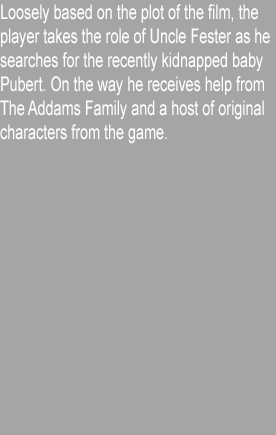
<style>
.page{position:relative;width:276px;height:435px;background:#a5a5a5}
.page>*{position:absolute;margin:0}
.t1{font:20px "ArialMT";color:#ffffff;scale:0.72 1}
</style>
<div class="page">
<p class="t1" style="left:0px;top:4px;width:270px;height:140px">Loosely based on the plot of the film, the player takes the role of Uncle Fester as he searches for the recently kidnapped baby Pubert. On the way he receives help from The Addams Family and a host of original characters from the game.</p>
</div>
